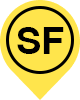
<style>
.page{position:relative;width:80px;height:100px;background:#ffe54c}
.page>*{position:absolute;margin:0}
.t1{font:38px "Helvetica-Bold";color:#000000}
</style>
<div class="page">
<p class="t1" style="left:17px;top:27px;width:47px;height:27px">SF</p>
</div>
